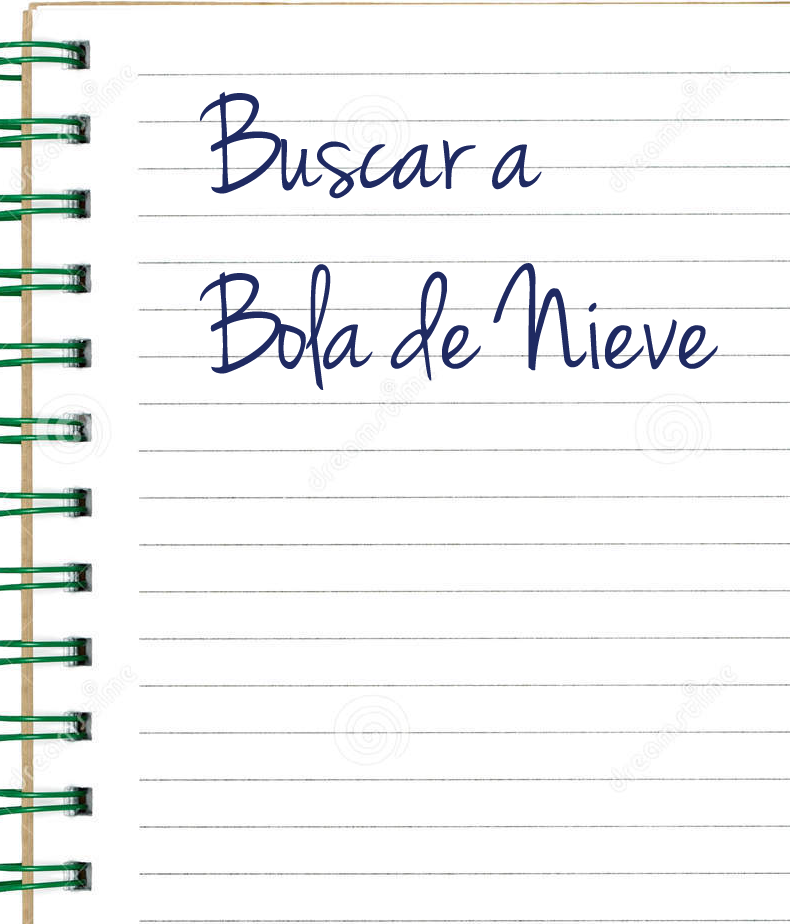
<style>
.page{position:relative;width:790px;height:924px;background:#ffffff}
.page>*{position:absolute;margin:0}
.t1{font:150px "JennaSue";color:#1f2a62}
</style>
<div class="page">
<p class="t1" style="left:199px;top:91px;width:519px;height:299px">Buscar a<br>Bola de Nieve</p>
</div>
